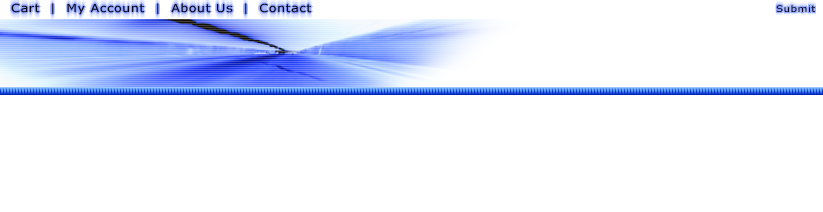
<style>
.page{position:relative;width:823px;height:212px;background:#ffffff}
.page>*{position:absolute;margin:0}
.t1{font:11px "Verdana";letter-spacing:0.05em;color:#0a0619;scale:1.15 1}
.t2{font:9px "Verdana";letter-spacing:0.05em;color:#0a0619;scale:1.15 1}
</style>
<div class="page">
<p class="t1" style="left:11px;top:3px;width:300px;height:12px">Cart  |  My Account  |  About Us  |  Contact</p>
<p class="t2" style="left:776px;top:5px;width:39px;height:7px">Submit</p>
</div>
